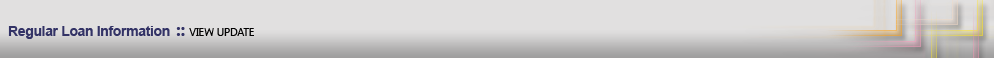
<style>
.page{position:relative;width:994px;height:58px;background:#e1e0e0}
.page>*{position:absolute;margin:0}
.t1{font:14px "Arial-BoldMT";letter-spacing:-0.025em;color:#333366}
.t2{font:18px "SegoeUI-Bold";letter-spacing:-0.025em;color:#333366}
.t3{font:11px "SegoeUI";letter-spacing:-0.025em;color:#010101}
</style>
<div class="page">
<p class="t1" style="left:8px;top:26px;width:246px;height:13px">Regular Loan Information <span class="t2">:: </span><span class="t3">VIEW UPDATE</span></p>
</div>
